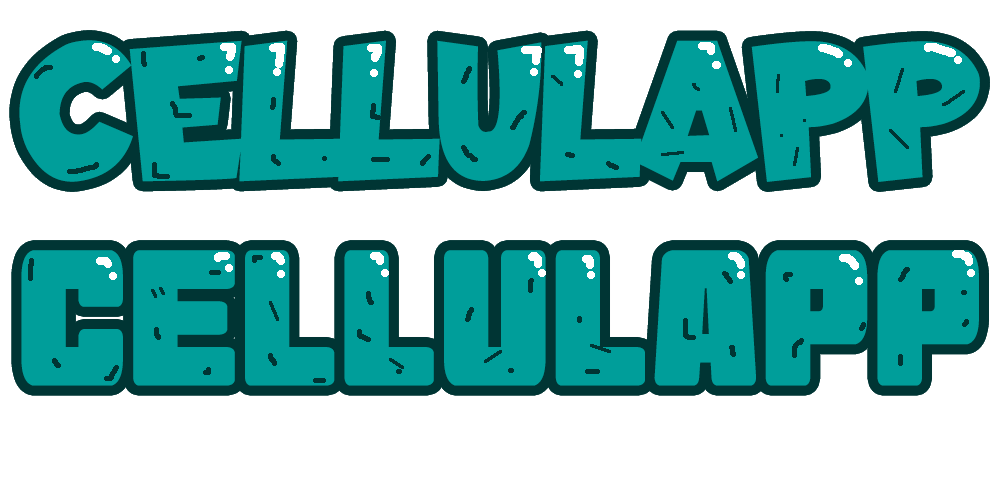
<style>
.page{position:relative;width:1000px;height:500px;background:#ffffff}
.page>*{position:absolute;margin:0}
.t1{font:200px "LapsusPro-Bold";color:#009e9a}
.t2{font:180px "Goma-Block";color:#009e9a}
</style>
<div class="page">
<p class="t1" style="left:19px;top:40px;width:961px;height:142px">CELLULAPP</p>
<p class="t2" style="left:21px;top:250px;width:958px;height:136px">CELLULAPP</p>
</div>
